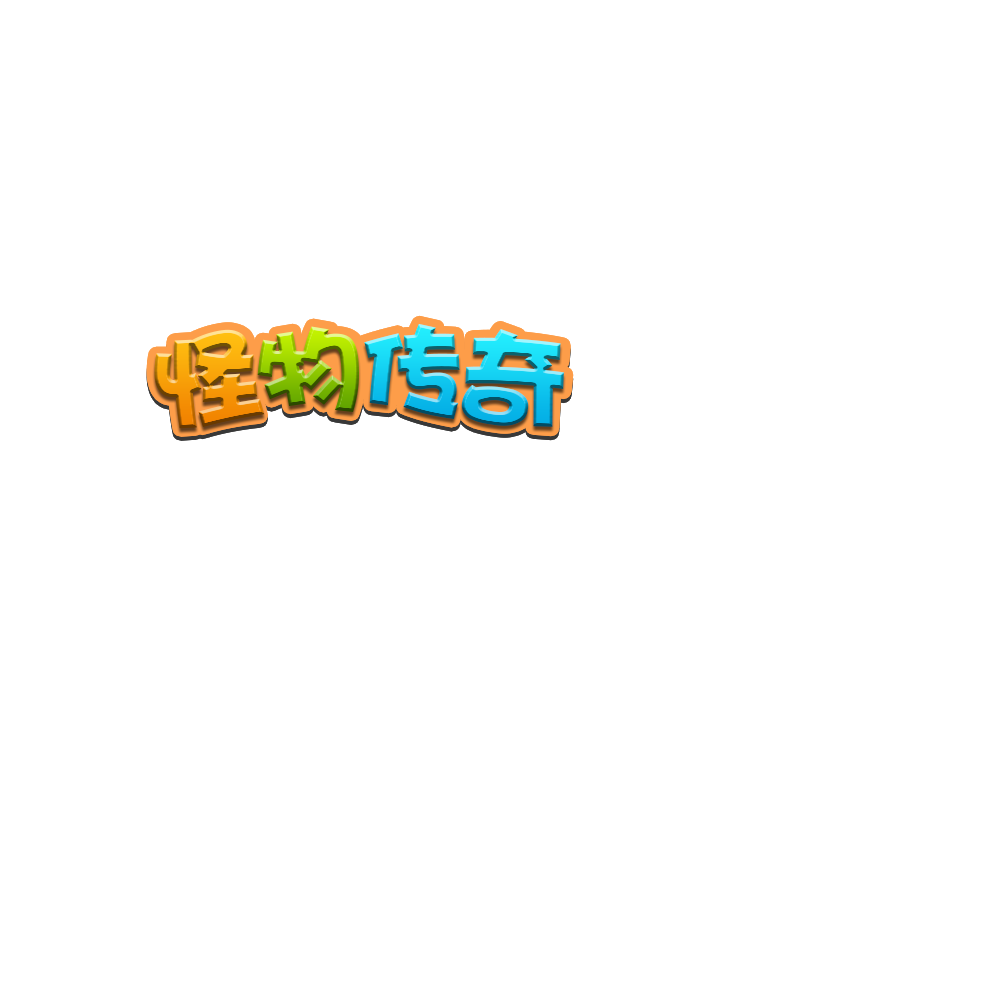
<style>
.page{position:relative;width:1000px;height:1000px;background:#ffffff}
.page>*{position:absolute;margin:0}
.t1{font:106.2px "DFPHaiBaoW12";letter-spacing:-0.08em;scale:1.08 1}
.t2{font:106px "DFPHaiBaoW12";letter-spacing:-0.08em;scale:1.05 1}
.t3{font:106.1px "DFPHaiBaoW12";letter-spacing:-0.08em;scale:1.05 1}
</style>
<div class="page">
<p class="t1" style="left:154px;top:329px;width:111px;height:100px;rotate:-8deg">怪</p>
<p class="t2" style="left:257px;top:326px;width:102px;height:86px;rotate:-3deg">物</p>
<p class="t2" style="left:364px;top:323px;width:96px;height:96px;rotate:3deg">传</p>
<p class="t3" style="left:461px;top:329px;width:103px;height:98px;rotate:8deg">奇</p>
</div>
